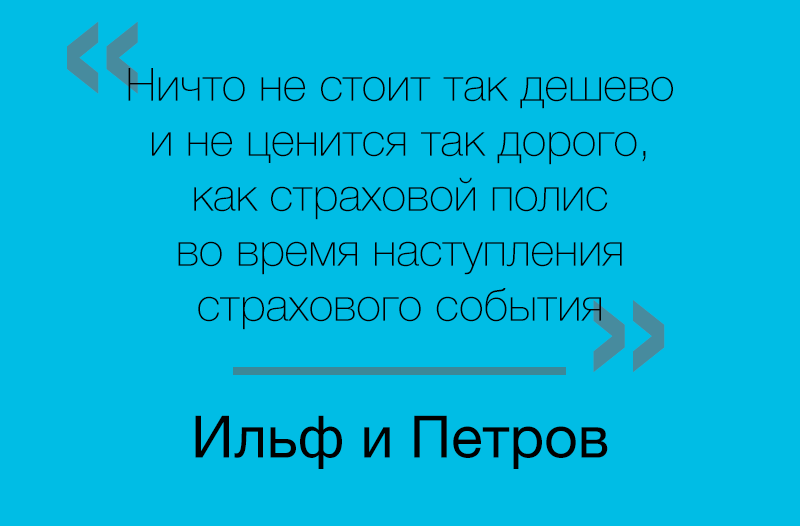
<style>
.page{position:relative;width:800px;height:526px;background:#00bde5}
.page>*{position:absolute;margin:0}
.t1{font:200px "HelveticaNeue-Medium";color:#478b9e}
.t2{font:45.8px "HelveticaNeue-Thin";color:#000000}
.t3{font:58.3px "HelveticaNeue";color:#000000}
</style>
<div class="page">
<p class="t1" style="left:67px;top:21px;width:71px;height:73px">«</p>
<p class="t2" style="left:128px;top:68px;width:545px;height:262px;text-align:center">Ничто не стоит так дешево<br>и не ценится так дорого,<br>как страховой полис <br>во время наступления <br>страхового события</p>
<p class="t1" style="left:593px;top:300px;width:72px;height:72px">»</p>
<p class="t3" style="left:195px;top:415px;width:413px;height:54px">Ильф и Петров</p>
</div>
